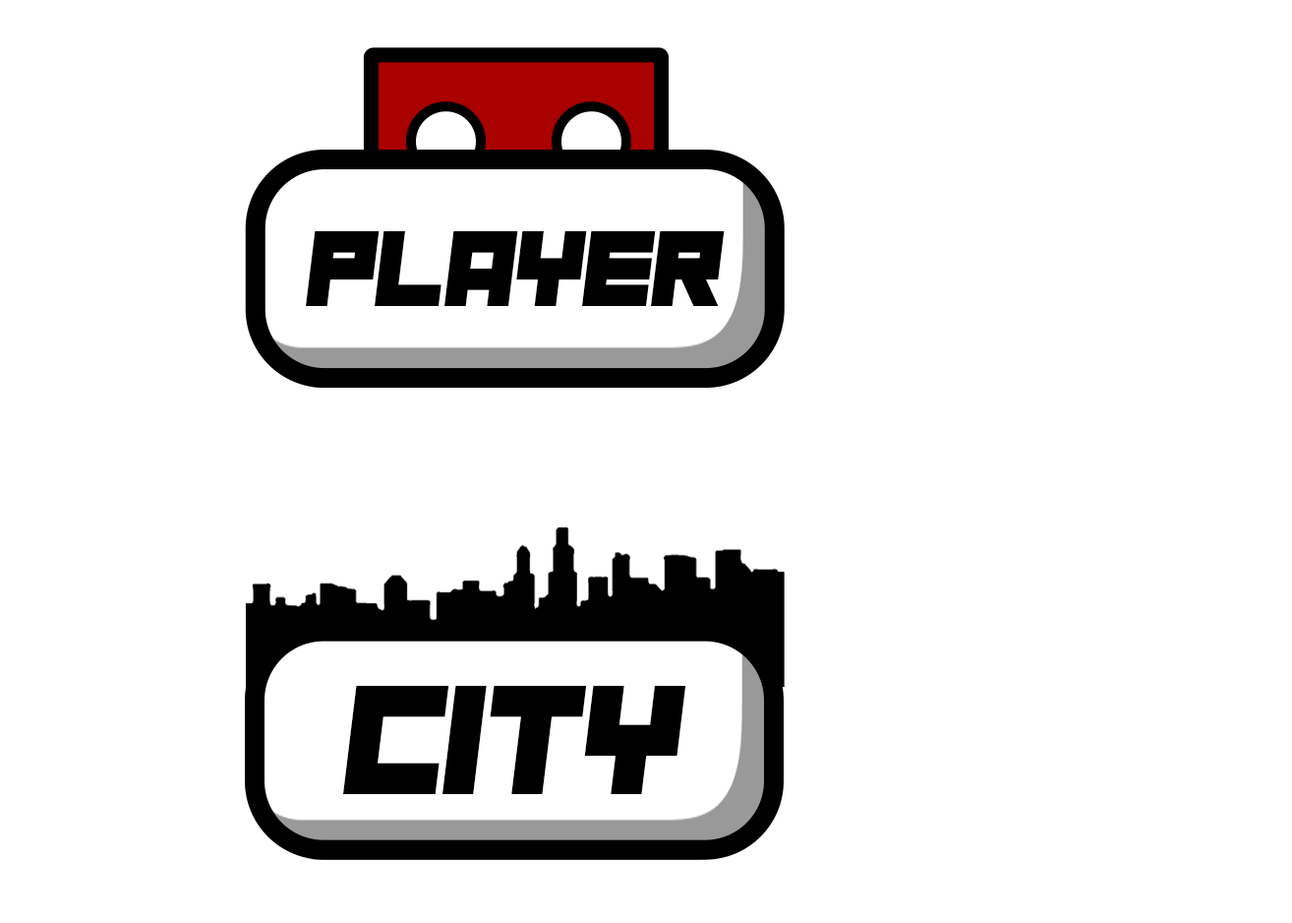
<style>
.page{position:relative;width:1292px;height:923px;background:#ffffff}
.page>*{position:absolute;margin:0}
.t1{font:108.8px "NauSea";color:#000000}
.t2{font:156.9px "NauSea";color:#000000}
</style>
<div class="page">
<p class="t1" style="left:306px;top:231px;width:419px;height:75px">Player</p>
<p class="t2" style="left:343px;top:686px;width:344px;height:108px">city</p>
</div>
